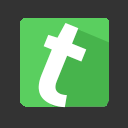
<style>
.page{position:relative;width:128px;height:128px;background:#333333}
.page>*{position:absolute;margin:0}
.t1{font:111.2px "NotoSansCJKtc-Bold";color:#ffffff}
</style>
<div class="page">
<p class="t1" style="left:38px;top:23px;width:49px;height:85px;rotate:22deg">t</p>
</div>
